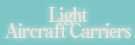
<style>
.page{position:relative;width:135px;height:45px;background:#7dc6c6}
.page>*{position:absolute;margin:0}
.t1{font:20px/16px "RyuminPro-ExBold";letter-spacing:-0.08em;color:#f1e6d8;scale:0.9 1}
</style>
<div class="page">
<p class="t1" style="left:5px;top:7px;width:126px;height:32px;text-align:center">Light<br>Aircraft Carriers</p>
</div>
